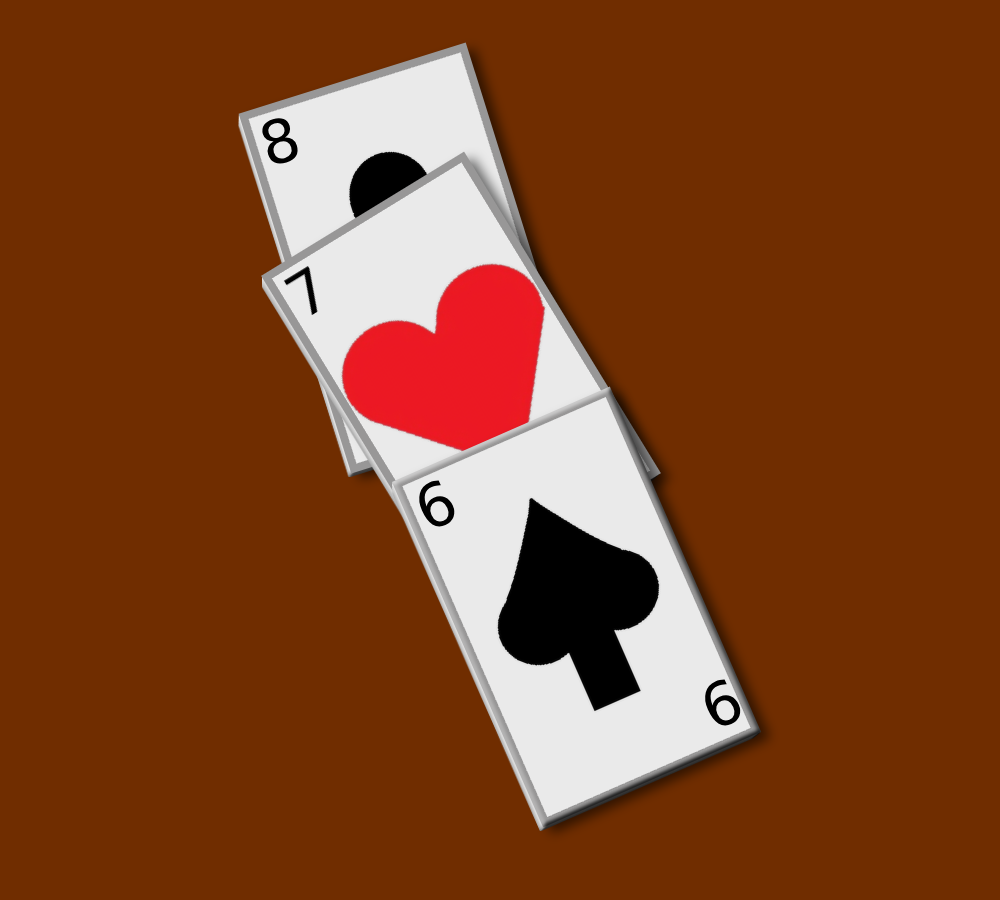
<style>
.page{position:relative;width:1000px;height:900px;background:#702d00}
.page>*{position:absolute;margin:0}
.t1{font:60px "DejaVuSans";color:#000000}
</style>
<div class="page">
<p class="t1" style="left:262px;top:118px;width:36px;height:46px;rotate:-17deg">8</p>
<p class="t1" style="left:419px;top:480px;width:36px;height:47px;rotate:-24deg">6</p>
<p class="t1" style="left:705px;top:679px;width:36px;height:47px;rotate:-24deg">6</p>
</div>
